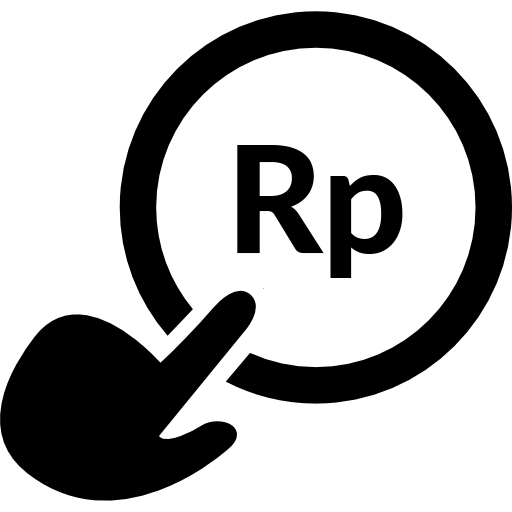
<style>
.page{position:relative;width:512px;height:512px;background:#ffffff}
.page>*{position:absolute;margin:0}
.t1{font:148.8px "Lato-Heavy";color:#000000}
</style>
<div class="page">
<p class="t1" style="left:237px;top:145px;width:166px;height:133px">Rp</p>
</div>
